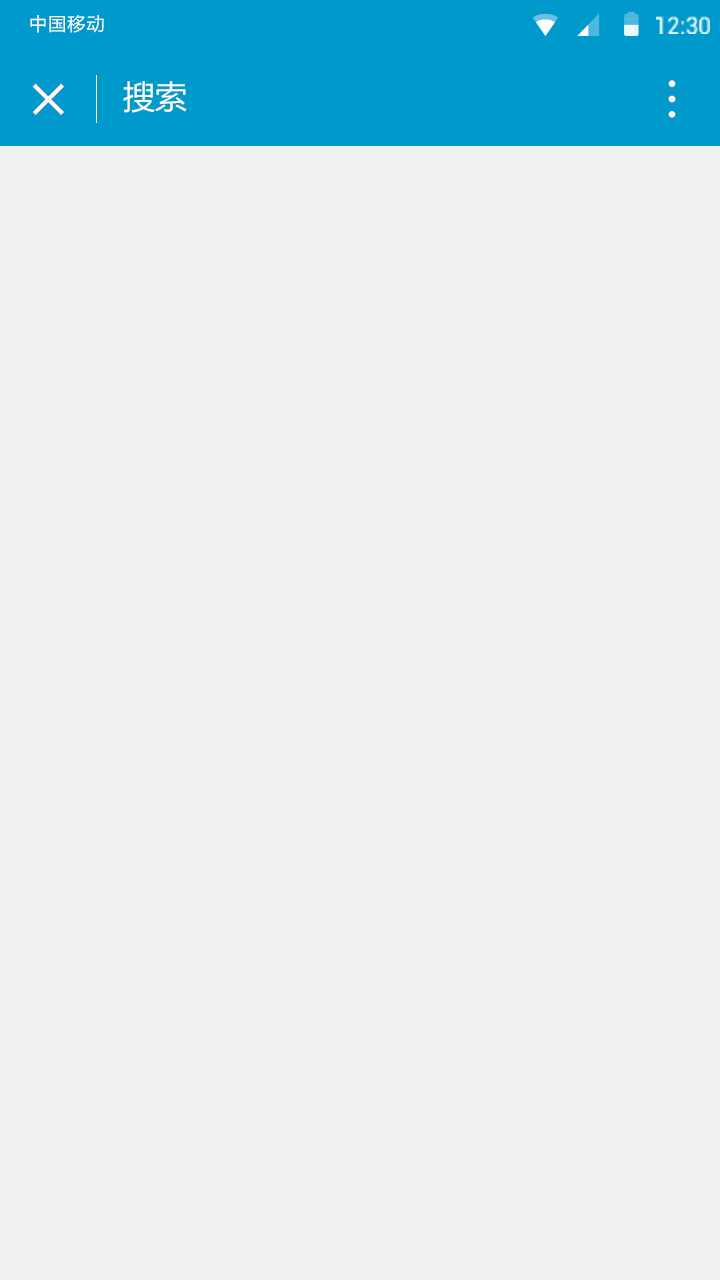
<style>
.page{position:relative;width:720px;height:1280px;background:#f0f0f0}
.page>*{position:absolute;margin:0}
.t1{font:17.9px "MicrosoftYaHei";letter-spacing:0.065em;color:#ffffff}
.t2{font:32px "MicrosoftYaHei";color:#fefdf8}
</style>
<div class="page">
<p class="t1" style="left:30px;top:15px;width:74px;height:18px">中国移动</p>
<p class="t2" style="left:123px;top:81px;width:64px;height:32px">搜索</p>
</div>
